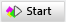
<style>
.page{position:relative;width:66px;height:22px}
.page>*{position:absolute;margin:0}
.t1{font:11.2px "Tahoma";letter-spacing:0.1em;color:#000000;scale:0.86 1}
</style>
<div class="page">
<p class="t1" style="left:27px;top:7px;width:25px;height:8px">Start</p>
</div>
